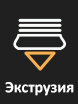
<style>
.page{position:relative;width:78px;height:104px;background:#202020}
.page>*{position:absolute;margin:0}
.t1{font:12px "Calibri-Bold";color:#ffffff}
</style>
<div class="page">
<p class="t1" style="left:5px;top:82px;width:69px;height:14px">Экструзия</p>
</div>
